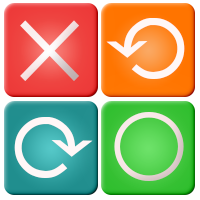
<style>
.page{position:relative;width:200px;height:200px}
.page>*{position:absolute;margin:0}
.t1{font:115px "MyriadPro-Regular";color:#fff7f7}
.t2{font:139.5px "AppleSymbols";color:#fff7f7}
.t3{font:101.3px "AppleSDGothicNeo-Regular"}
</style>
<div class="page">
<p class="t1" style="left:20px;top:20px;width:59px;height:61px">×</p>
<p class="t2" style="left:106px;top:18px;width:79px;height:61px">⟲</p>
<p class="t3" style="left:114px;top:112px;width:70px;height:69px">○</p>
<p class="t2" style="left:14px;top:117px;width:79px;height:61px">⟳</p>
</div>
